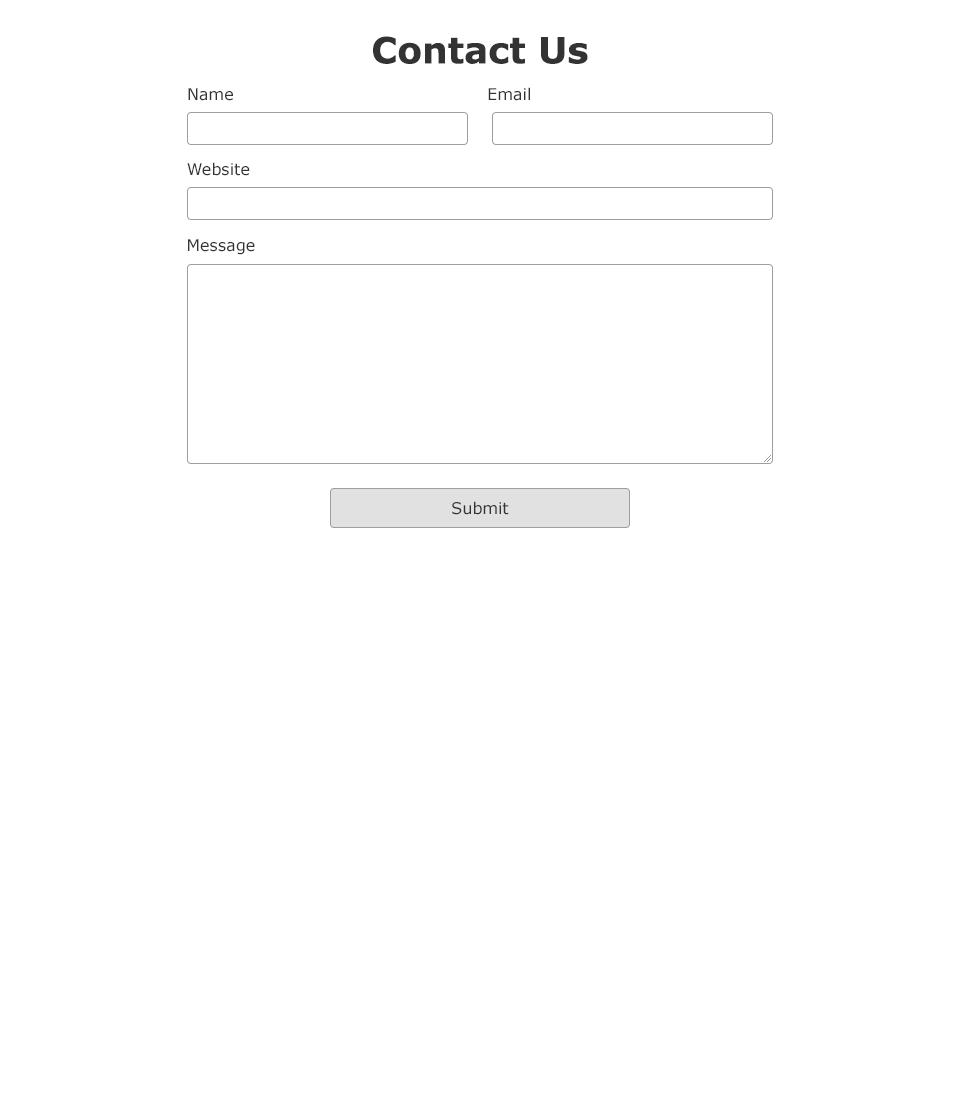
<style>
.page{position:relative;width:960px;height:1100px;background:#ffffff}
.page>*{position:absolute;margin:0}
.t1{font:36px "Verdana-Bold";color:#333333}
.t2{font:16px "Verdana";color:#333333}
</style>
<div class="page">
<p class="t1" style="left:373px;top:36px;width:215px;height:28px">Contact Us</p>
<p class="t2" style="left:188px;top:88px;width:45px;height:13px">Name</p>
<p class="t2" style="left:488px;top:87px;width:42px;height:14px">Email</p>
<p class="t2" style="left:187px;top:162px;width:63px;height:14px">Website</p>
<p class="t2" style="left:188px;top:239px;width:67px;height:16px">Message</p>
<p class="t2" style="left:452px;top:501px;width:57px;height:14px">Submit</p>
</div>
